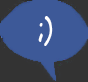
<style>
.page{position:relative;width:88px;height:82px;background:#3d5998}
.page>*{position:absolute;margin:0}
.t1{font:30px "SuplexmentaryComicNC";color:#ffffff;scale:0.8 1}
</style>
<div class="page">
<p class="t1" style="left:38px;top:16px;width:15px;height:30px">;)</p>
</div>
